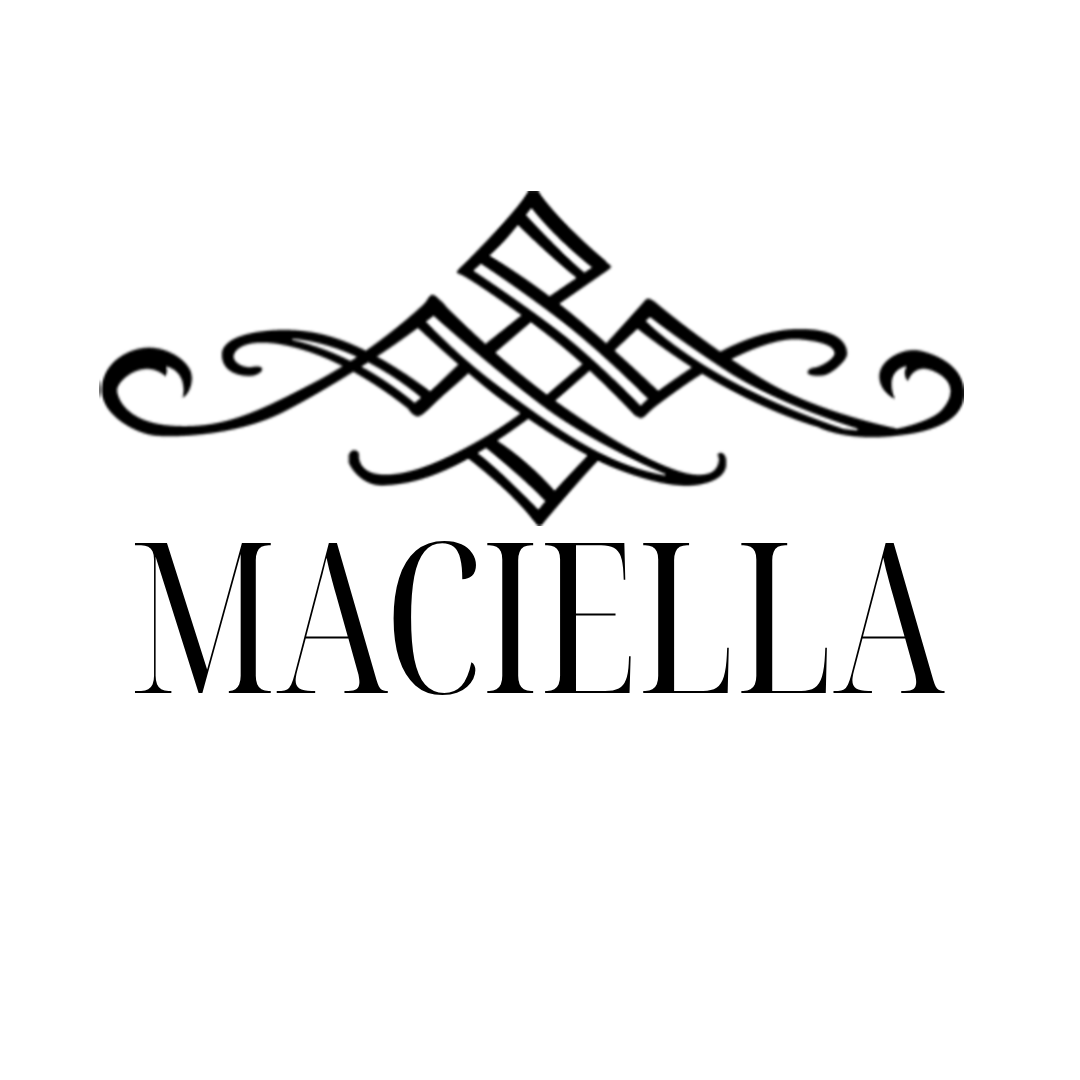
<style>
.page{position:relative;width:1080px;height:1080px;background:#ffffff}
.page>*{position:absolute;margin:0}
.t1{font:210px "NotoSerifDisplay-Regular";color:#000000;scale:0.75 1}
</style>
<div class="page">
<p class="t1" style="left:134px;top:540px;width:811px;height:156px">MACIELLA</p>
</div>
